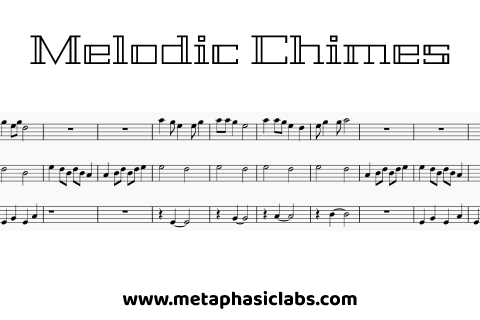
<style>
.page{position:relative;width:480px;height:320px;background:#ffffff}
.page>*{position:absolute;margin:0}
.t1{font:41px "Geostar-Regular";color:#000000}
.t2{font:20px "Baloo2-Bold";color:#000000}
</style>
<div class="page">
<p class="t1" style="left:30px;top:35px;width:420px;height:30px">Melodic Chimes</p>
<p class="t2" style="left:122px;top:290px;width:235px;height:19px">www.metaphasiclabs.com</p>
</div>
